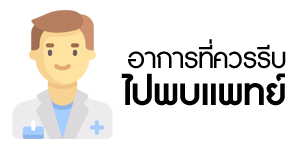
<style>
.page{position:relative;width:300px;height:148px;background:#ffffff}
.page>*{position:absolute;margin:0}
.t1{font:36px "DBAdmanX";letter-spacing:-0.015em;color:#000000}
.t2{font:48px "DBAdmanX-Bold";letter-spacing:-0.015em;color:#000000}
</style>
<div class="page">
<p class="t1" style="left:128px;top:39px;width:158px;height:30px">อาการที่ควรรีบ</p>
<p class="t2" style="left:121px;top:73px;width:164px;height:33px">ไปพบแพทย์</p>
</div>
